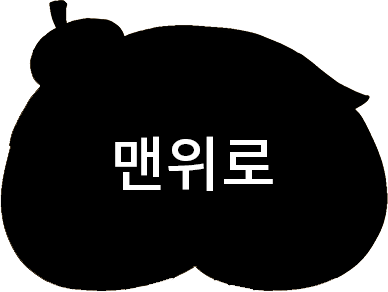
<style>
.page{position:relative;width:388px;height:292px;background:#000000}
.page>*{position:absolute;margin:0}
.t1{font:60px "NotoSansKR-Medium";color:#ffffff}
</style>
<div class="page">
<p class="t1" style="left:115px;top:136px;width:158px;height:55px">맨위로</p>
</div>
